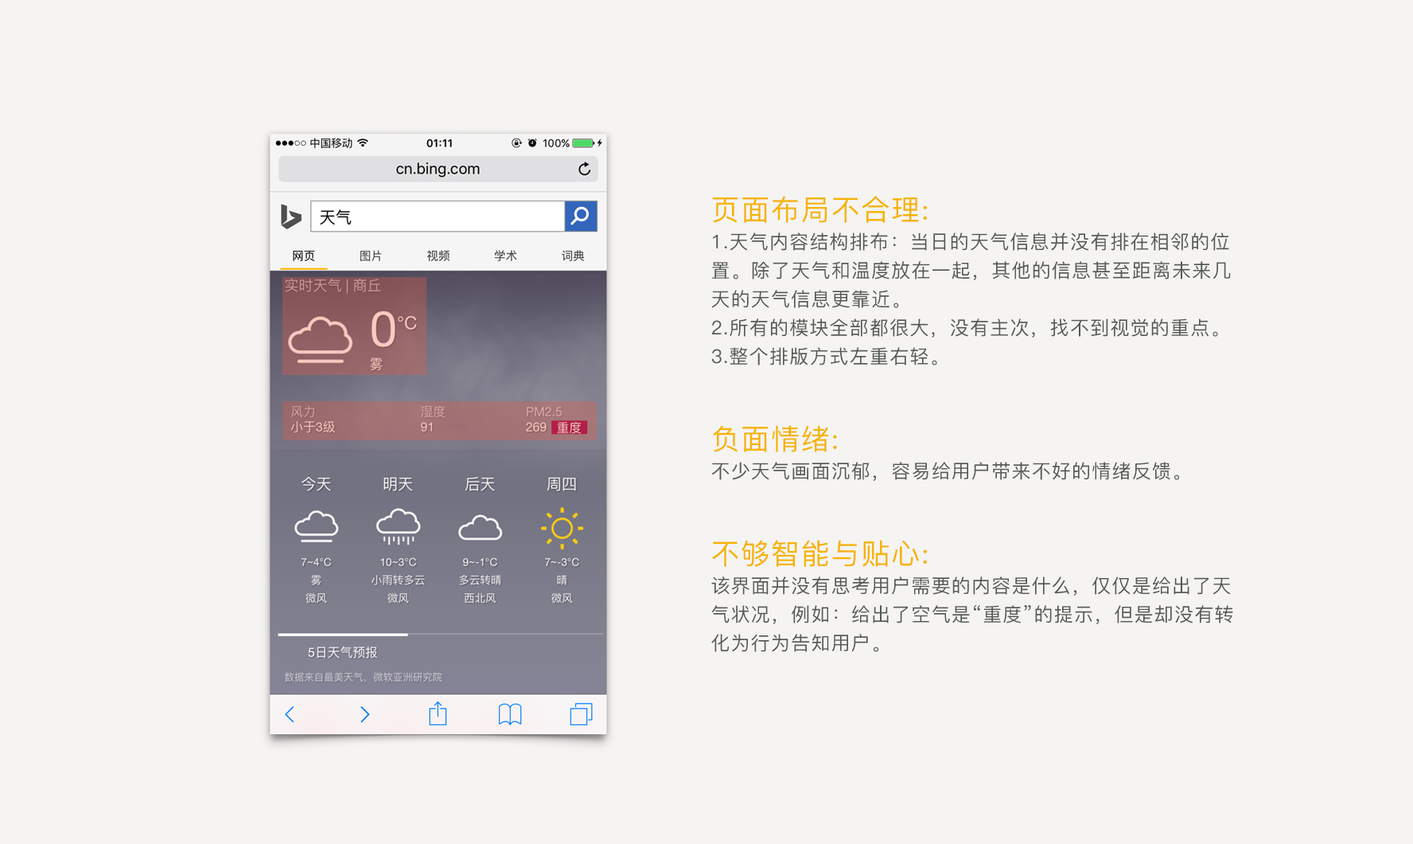
<style>
.page{position:relative;width:1413px;height:844px;background:#f5f4f2}
.page>*{position:absolute;margin:0}
.t1{font:19.1px/28.7px "PingFang-SC-Medium";letter-spacing:0.05em;color:#545953;text-transform:uppercase}
.t2{font:28.7px/28.7px "PingFang-SC-Medium";letter-spacing:0.05em;color:#f6b302;text-transform:uppercase}
</style>
<div class="page">
<p class="t1" style="left:712px;top:196px;width:522px;height:456px"><span class="t2">页面布局不合理:<br></span>1.天气内容结构排布：当日的天气信息并没有排在相邻的位置。除了天气和温度放在一起，其他的信息甚至距离未来几天的天气信息更靠近。<br>2.所有的模块全部都很大，没有主次，找不到视觉的重点。<br>3.整个排版方式左重右轻。<br><br><br><span class="t2">负面情绪:<br></span>不少天气画面沉郁，容易给用户带来不好的情绪反馈。<br><br><br><span class="t2">不够智能与贴心:<br></span>该界面并没有思考用户需要的内容是什么，仅仅是给出了天气状况，例如：给出了空气是“重度”的提示，但是却没有转化为行为告知用户。</p>
</div>
